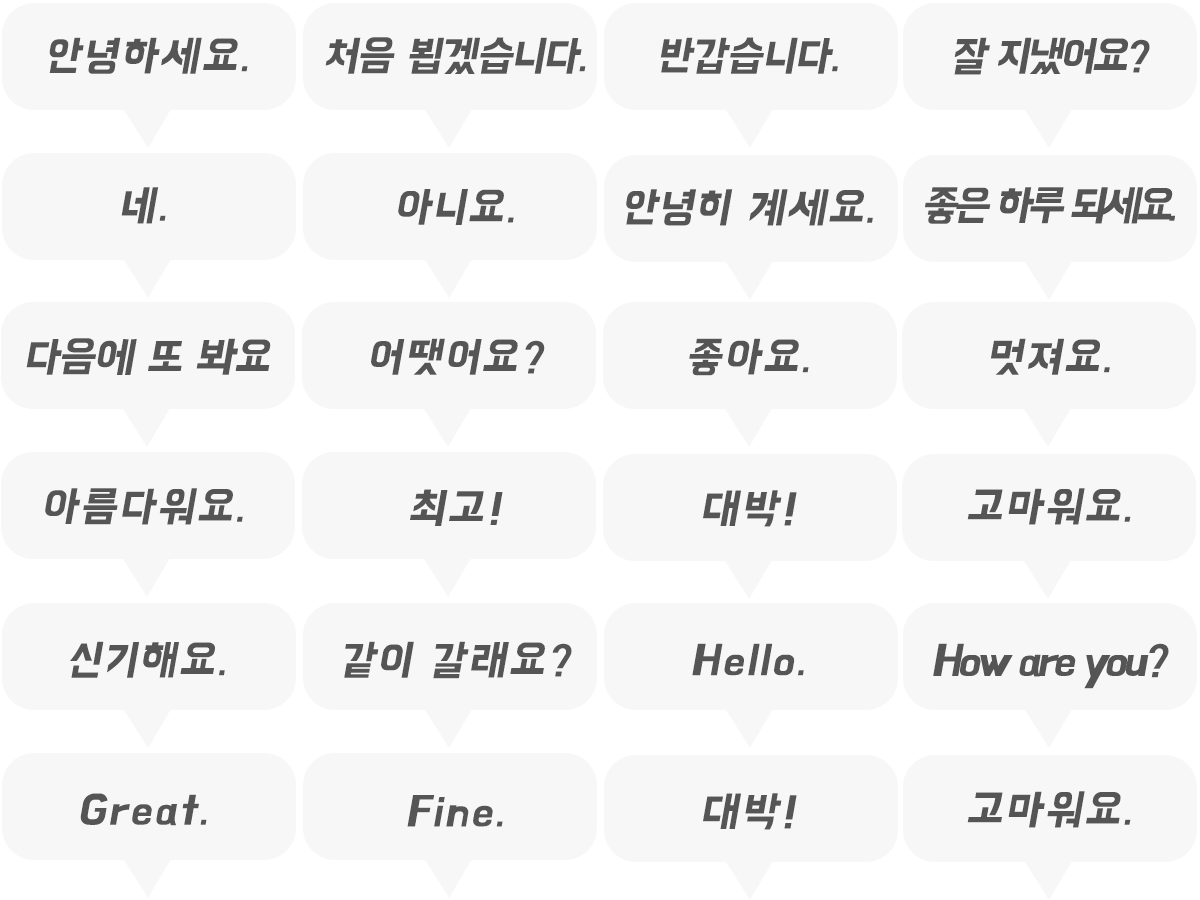
<style>
.page{position:relative;width:1200px;height:900px;background:#f7f7f7}
.page>*{position:absolute;margin:0}
.t1{font:42.7px "BMHANNA11yrsold";letter-spacing:0.06em;color:#555555;font-style:italic}
.t2{font:42.7px "BMHANNA11yrsold";letter-spacing:-0.02em;color:#555555;font-style:italic}
.t3{font:42.7px "BMHANNA11yrsold";color:#555555;font-style:italic}
.t4{font:42.7px "BMHANNA11yrsold";letter-spacing:-0.06em;color:#555555;font-style:italic}
.t5{font:42.7px "BMHANNA11yrsold";letter-spacing:0.04em;color:#555555;font-style:italic}
.t6{font:42.7px "BMHANNA11yrsold";letter-spacing:-0.1em;color:#555555;font-style:italic}
.t7{font:43.7px "BMHANNA11yrsold";letter-spacing:-0.08em;color:#555555;font-style:italic}
</style>
<div class="page">
<p class="t1" style="left:49px;top:37px;width:199px;height:37px">안녕하세요.</p>
<p class="t2" style="left:325px;top:37px;width:261px;height:37px">처음 뵙겠습니다.</p>
<p class="t3" style="left:660px;top:37px;width:178px;height:37px">반갑습니다.</p>
<p class="t4" style="left:954px;top:37px;width:196px;height:38px">잘 지냈어요?</p>
<p class="t1" style="left:121px;top:187px;width:45px;height:37px">네.</p>
<p class="t1" style="left:398px;top:189px;width:116px;height:36px">아니요.</p>
<p class="t5" style="left:626px;top:189px;width:247px;height:37px">안녕히 계세요.</p>
<p class="t6" style="left:925px;top:187px;width:251px;height:37px">좋은 하루 되세요.</p>
<p class="t2" style="left:26px;top:338px;width:245px;height:37px">다음에 또 봐요</p>
<p class="t1" style="left:371px;top:338px;width:174px;height:37px">어땟어요?</p>
<p class="t1" style="left:689px;top:338px;width:120px;height:38px">좋아요.</p>
<p class="t1" style="left:990px;top:338px;width:120px;height:37px">멋져요.</p>
<p class="t1" style="left:45px;top:488px;width:198px;height:37px">아름다워요.</p>
<p class="t1" style="left:410px;top:489px;width:93px;height:37px">최고!</p>
<p class="t1" style="left:703px;top:490px;width:94px;height:37px">대박!</p>
<p class="t1" style="left:967px;top:488px;width:164px;height:37px">고마워요.</p>
<p class="t1" style="left:70px;top:641px;width:155px;height:37px">신기해요.</p>
<p class="t1" style="left:344px;top:641px;width:228px;height:38px">같이 갈래요?</p>
<p class="t1" style="left:692px;top:643px;width:112px;height:33px">Hello.</p>
<p class="t7" style="left:933px;top:643px;width:236px;height:46px">How are you?</p>
<p class="t1" style="left:80px;top:793px;width:127px;height:33px">Great.</p>
<p class="t1" style="left:407px;top:795px;width:96px;height:32px">Fine.</p>
<p class="t1" style="left:703px;top:793px;width:94px;height:37px">대박!</p>
<p class="t1" style="left:967px;top:791px;width:164px;height:37px">고마워요.</p>
</div>
